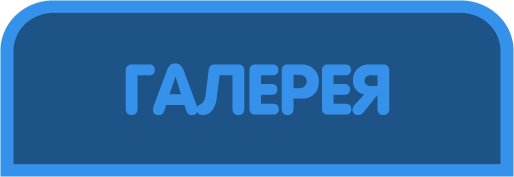
<style>
.page{position:relative;width:514px;height:177px;background:#1e5387}
.page>*{position:absolute;margin:0}
.t1{font:70px "VAGWorld-Bold";color:#3691eb}
</style>
<div class="page">
<p class="t1" style="left:125px;top:63px;width:265px;height:52px">ГАЛЕРЕЯ</p>
</div>
